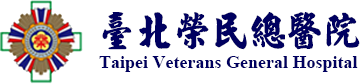
<style>
.page{position:relative;width:362px;height:84px;background:#ffffff}
.page>*{position:absolute;margin:0}
.t1{font:18px/26.7px "TimesNewRomanPS-BoldMT";color:#000060}
.t2{font:37.3px/26.7px "ª÷±ö¤ò±i·¢";color:#000060}
</style>
<div class="page">
<p class="t1" style="left:99px;top:12px;width:261px;height:60px"><span class="t2">臺北榮民總醫院<br></span>Taipei Veterans General Hospital</p>
</div>
